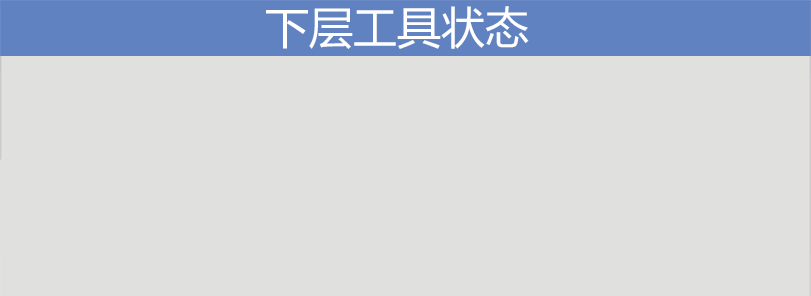
<style>
.page{position:relative;width:811px;height:296px;background:#e0e0df}
.page>*{position:absolute;margin:0}
.t1{font:44px "MicrosoftYaHei";color:#ffffff}
</style>
<div class="page">
<p class="t1" style="left:266px;top:6px;width:263px;height:43px">下层工具状态</p>
</div>
